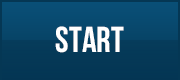
<style>
.page{position:relative;width:180px;height:80px}
.page>*{position:absolute;margin:0}
.t1{font:36px "UTM-Bebas";color:#ffffff}
</style>
<div class="page">
<p class="t1" style="left:55px;top:26px;width:69px;height:27px">start</p>
</div>
